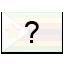
<style>
.page{position:relative;width:64px;height:64px;background:#ffffff}
.page>*{position:absolute;margin:0}
.t1{font:30px "ArialMT";color:#000000}
</style>
<div class="page">
<p class="t1" style="left:25px;top:21px;width:14px;height:22px">?</p>
</div>
